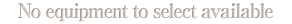
<style>
.page{position:relative;width:292px;height:24px;background:#ffffff}
.page>*{position:absolute;margin:0}
.t1{font:20px "RyuminPro-ExBold";letter-spacing:-0.08em;color:#bcb2ab}
</style>
<div class="page">
<p class="t1" style="left:18px;top:3px;width:255px;height:19px">No equipment to select available</p>
</div>
